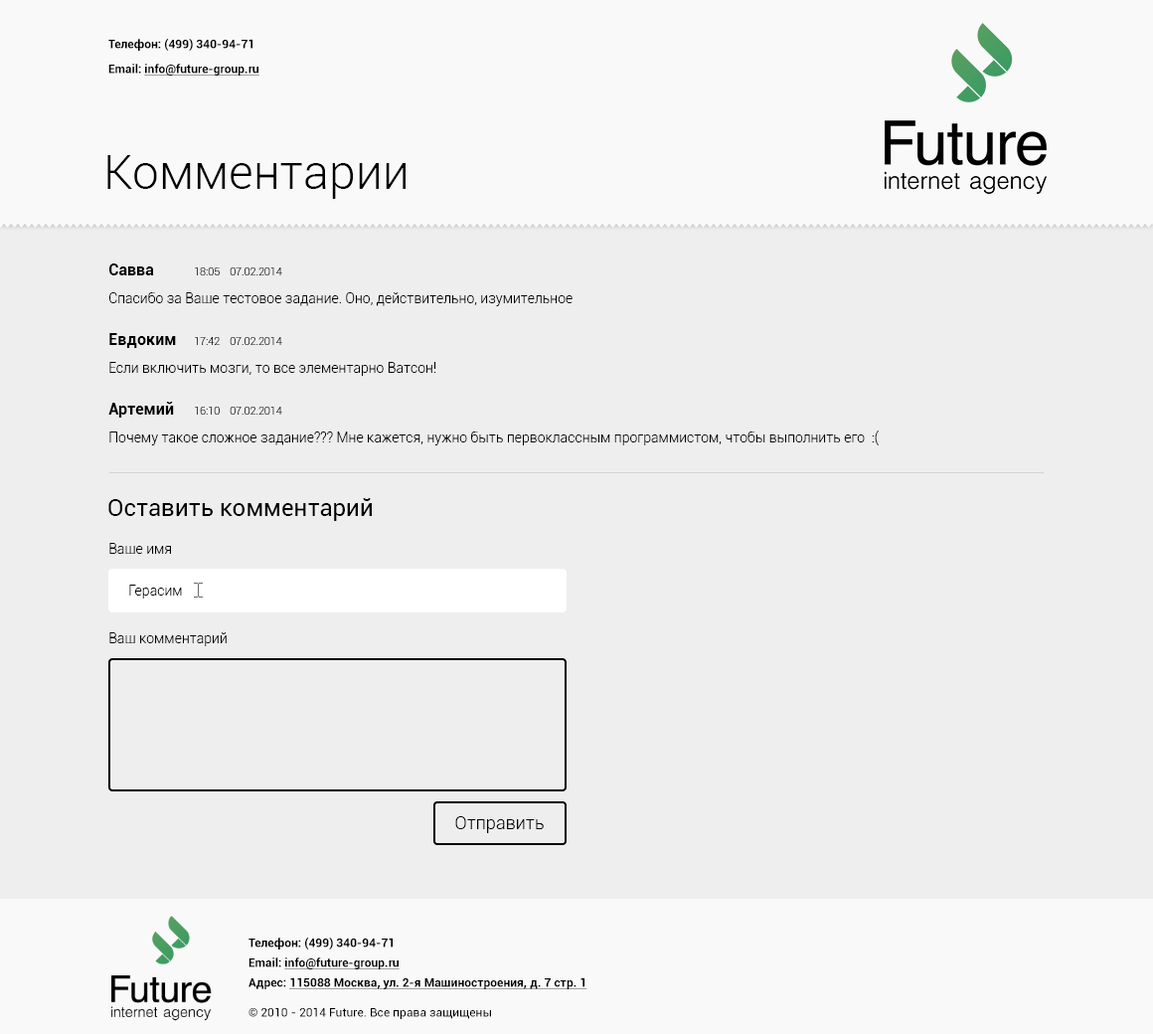
<style>
.page{position:relative;width:1153px;height:1034px;background:#eeeeee}
.page>*{position:absolute;margin:0}
.t1{font:11.9px "Roboto-Bold";color:#000000}
.t2{font:11.9px "Roboto-Bold";color:#000000;text-decoration:underline}
.t3{font:47.7px "Roboto-Light";color:#000000}
.t4{font:15.9px "Roboto-Bold";color:#000000}
.t5{font:10.6px "Roboto-Light"}
.t6{font:13.9px "Roboto-Light";color:#000000}
.t7{font:10.6px "Roboto-Light";color:#000000}
.t8{font:23.9px "Roboto-Regular";color:#000000}
.t9{font:17.9px "Roboto-Light";color:#000000}
.t10{font:11.9px "Roboto-Regular";color:#000000}
</style>
<div class="page">
<p class="t1" style="left:108px;top:39px;width:145px;height:12px">Телефон: (499) 340-94-71</p>
<p class="t2" style="left:108px;top:64px;width:151px;height:12px"><span class="t1">Email: </span>info@future-group.ru</p>
<p class="t3" style="left:107px;top:155px;width:299px;height:44px">Комментарии</p>
<p class="t4" style="left:109px;top:263px;width:45px;height:12px">Савва</p>
<p class="t5" style="left:195px;top:267px;width:25px;height:8px">18:05</p>
<p class="t5" style="left:230px;top:267px;width:52px;height:8px">07.02.2014</p>
<p class="t6" style="left:109px;top:292px;width:464px;height:14px">Спасибо за Ваше тестовое задание. Оно, действительно, изумительное</p>
<p class="t4" style="left:109px;top:333px;width:67px;height:15px">Евдоким</p>
<p class="t7" style="left:195px;top:337px;width:25px;height:8px">17:42</p>
<p class="t5" style="left:230px;top:337px;width:52px;height:8px">07.02.2014</p>
<p class="t6" style="left:109px;top:362px;width:327px;height:14px">Если включить мозги, то все элементарно Ватсон!</p>
<p class="t4" style="left:108px;top:402px;width:66px;height:16px">Артемий</p>
<p class="t5" style="left:195px;top:407px;width:25px;height:8px">16:10</p>
<p class="t5" style="left:230px;top:407px;width:52px;height:8px">07.02.2014</p>
<p class="t6" style="left:109px;top:430px;width:771px;height:15px">Почему такое сложное задание??? Мне кажется, нужно быть первоклассным программистом, чтобы выполнить его  :(</p>
<p class="t8" style="left:108px;top:498px;width:264px;height:23px">Оставить комментарий</p>
<p class="t6" style="left:109px;top:543px;width:62px;height:11px">Ваше имя</p>
<p class="t6" style="left:129px;top:585px;width:53px;height:14px">Герасим</p>
<p class="t6" style="left:109px;top:632px;width:118px;height:14px">Ваш комментарий</p>
<p class="t9" style="left:455px;top:816px;width:89px;height:17px">Отправить</p>
<p class="t1" style="left:249px;top:938px;width:144px;height:11px">Телефон: (499) 340-94-71</p>
<p class="t2" style="left:249px;top:957px;width:151px;height:12px"><span class="t1">Email: </span>info@future-group.ru</p>
<p class="t2" style="left:249px;top:977px;width:339px;height:12px"><span class="t1">Адрес: </span>115088 Москва, ул. 2-я Машиностроения, д. 7 стр. 1</p>
<p class="t10" style="left:249px;top:1007px;width:242px;height:12px">© 2010 - 2014 Future. Все права защищены</p>
</div>
